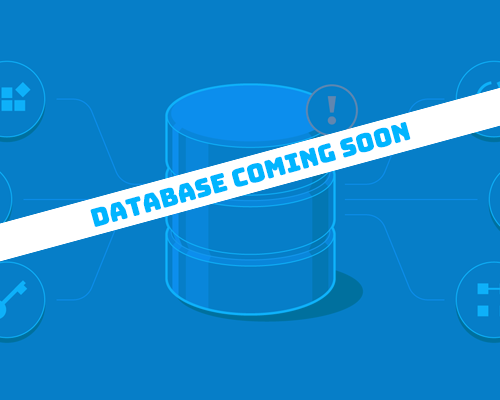
<style>
.page{position:relative;width:500px;height:400px;background:#067ec8}
.page>*{position:absolute;margin:0}
.t1{font:25px "BungeeLayers-Regular";color:#00b5ff}
</style>
<div class="page">
<p class="t1" style="left:90px;top:122px;width:321px;height:105px;rotate:-16deg">DATABASE COMING SOON</p>
</div>
